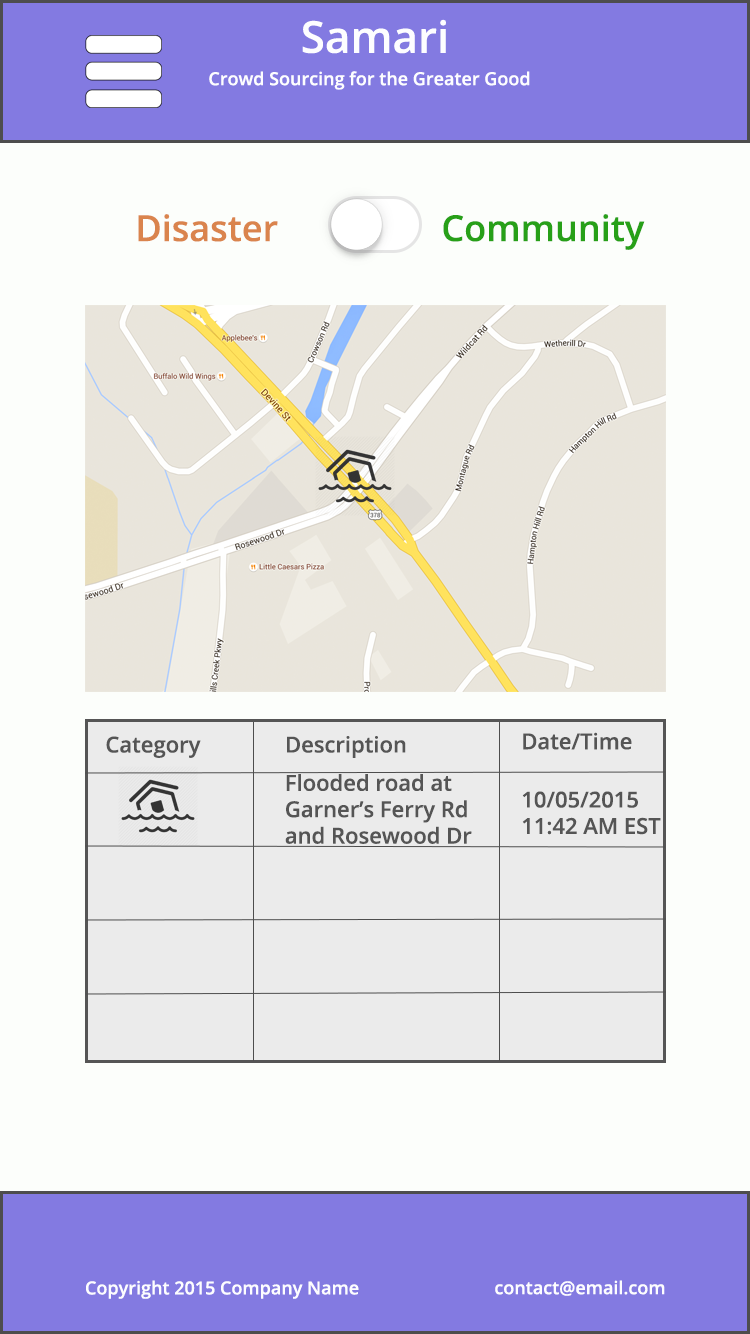
<style>
.page{position:relative;width:750px;height:1334px;background:#fcfefb}
.page>*{position:absolute;margin:0}
.t1{font:44px "OpenSans-Semibold";color:#fdfdff}
.t2{font:18px "OpenSans-Semibold";color:#fdfdff}
.t3{font:36px "OpenSans-Semibold";color:#da844d}
.t4{font:36px "OpenSans-Semibold";color:#27a018}
.t5{font:22px "OpenSans-Semibold";color:#555555}
</style>
<div class="page">
<p class="t1" style="left:302px;top:19px;width:144px;height:35px">Samari</p>
<p class="t2" style="left:209px;top:71px;width:321px;height:19px">Crowd Sourcing for the Greater Good</p>
<p class="t3" style="left:138px;top:214px;width:140px;height:28px">Disaster</p>
<p class="t4" style="left:443px;top:214px;width:202px;height:36px">Community</p>
<p class="t5" style="left:106px;top:736px;width:95px;height:22px">Category</p>
<p class="t5" style="left:287px;top:736px;width:119px;height:22px">Description</p>
<p class="t5" style="left:523px;top:732px;width:109px;height:18px">Date/Time</p>
<p class="t5" style="left:285px;top:774px;width:187px;height:70px">Flooded road at Garner’s Ferry Rd and Rosewood Dr</p>
<p class="t5" style="left:522px;top:791px;width:139px;height:44px">10/05/2015<br>11:42 AM EST</p>
<p class="t2" style="left:86px;top:1280px;width:273px;height:19px">Copyright 2015 Company Name</p>
<p class="t2" style="left:495px;top:1280px;width:170px;height:16px">contact@email.com</p>
</div>
